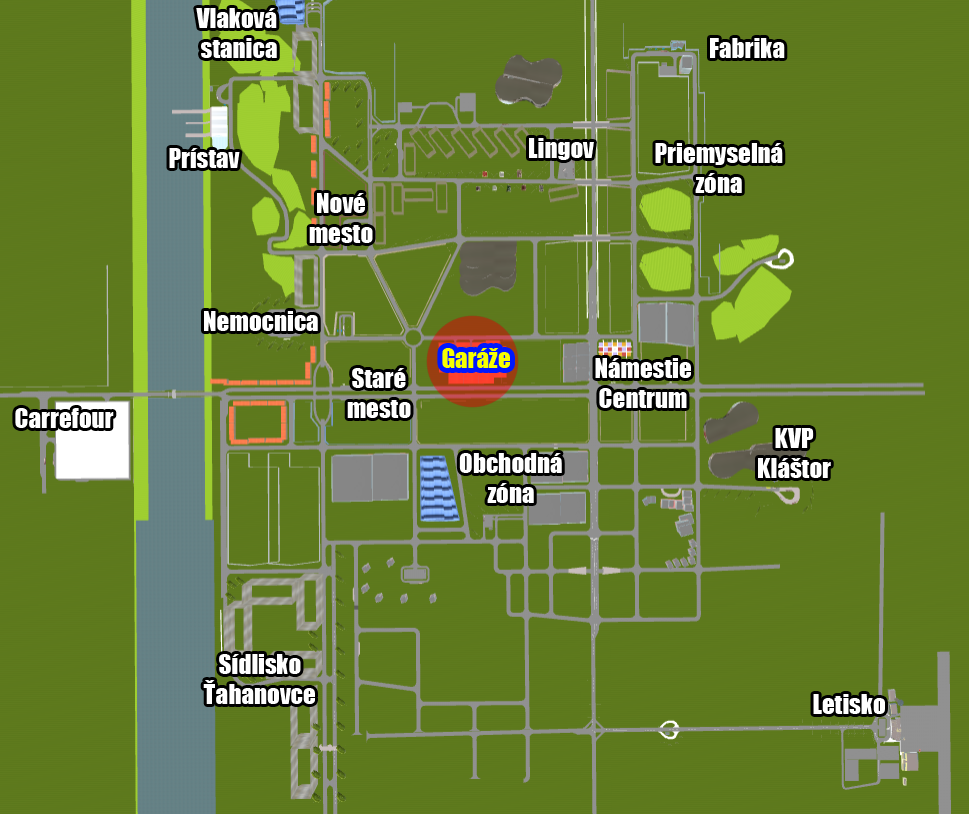
<style>
.page{position:relative;width:969px;height:814px}
.page>*{position:absolute;margin:0}
.t1{font:25px "Impact";color:#ffffff}
.t2{font:25px "Impact";color:#f6ff00}
</style>
<div class="page">
<p class="t1" style="left:196px;top:8px;width:81px;height:50px;text-align:center">Vlaková <br>stanica</p>
<p class="t1" style="left:710px;top:38px;width:75px;height:20px">Fabrika</p>
<p class="t1" style="left:169px;top:148px;width:71px;height:20px">Prístav</p>
<p class="t1" style="left:529px;top:138px;width:65px;height:22px">Lingov</p>
<p class="t1" style="left:655px;top:143px;width:128px;height:50px;text-align:center">Priemyselná<br>zóna</p>
<p class="t1" style="left:309px;top:193px;width:64px;height:50px;text-align:center">Nové<br>mesto</p>
<p class="t1" style="left:204px;top:311px;width:114px;height:20px">Nemocnica</p>
<p class="t2" style="left:442px;top:348px;width:68px;height:20px">Garáže</p>
<p class="t1" style="left:595px;top:358px;width:96px;height:50px;text-align:center">Námestie<br>Centrum</p>
<p class="t1" style="left:347px;top:368px;width:64px;height:50px;text-align:center">Staré<br>mesto</p>
<p class="t1" style="left:15px;top:408px;width:99px;height:20px">Carrefour</p>
<p class="t1" style="left:758px;top:428px;width:73px;height:50px;text-align:center">KVP<br>Kláštor</p>
<p class="t1" style="left:459px;top:453px;width:103px;height:50px;text-align:center">Obchodná<br>zóna</p>
<p class="t1" style="left:203px;top:654px;width:112px;height:50px;text-align:center">Sídlisko<br>Ťahanovce</p>
<p class="t1" style="left:813px;top:694px;width:72px;height:20px">Letisko</p>
</div>
